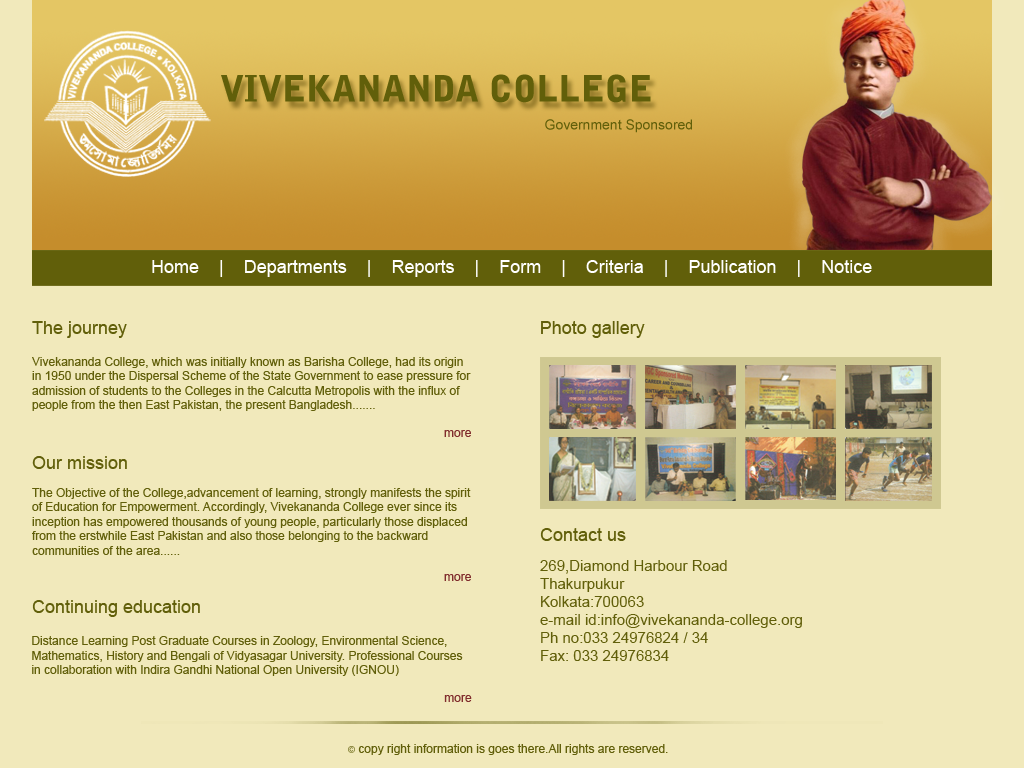
<style>
.page{position:relative;width:1024px;height:768px;background:#f1e9bb}
.page>*{position:absolute;margin:0}
.t1{font:36px "BellGothicStd-Black";color:#615f0a}
.t2{font:14px "ArialMT";color:#615f0a}
.t3{font:18px "ArialMT";color:#ffffff}
.t4{font:18px "ArialMT";color:#615f0a}
.t5{font:12px "ArialMT";color:#615f0a}
.t6{font:12px "ArialMT";color:#802c2c}
.t7{font:15px "ArialMT";color:#615f0a}
</style>
<div class="page">
<p class="t1" style="left:221px;top:74px;width:430px;height:29px">VIVEKANANDA COLLEGE</p>
<p class="t2" style="left:545px;top:119px;width:147px;height:14px">Government Sponsored</p>
<p class="t3" style="left:152px;top:260px;width:720px;height:17px">Home    |    Departments    |    Reports    |    Form    |    Criteria    |    Publication    |    Notice</p>
<p class="t4" style="left:32px;top:321px;width:95px;height:17px">The journey</p>
<p class="t4" style="left:541px;top:321px;width:104px;height:17px">Photo gallery</p>
<p class="t5" style="left:32px;top:357px;width:439px;height:54px">Vivekananda College, which was initially known as Barisha College, had its origin<br>in 1950 under the Dispersal Scheme of the State Government to ease pressure for<br>admission of students to the Colleges in the Calcutta Metropolis with the influx of <br>people from the then East Pakistan, the present Bangladesh.......</p>
<p class="t6" style="left:444px;top:430px;width:27px;height:7px">more</p>
<p class="t4" style="left:32px;top:456px;width:95px;height:13px">Our mission</p>
<p class="t5" style="left:32px;top:488px;width:439px;height:67px">The Objective of the College,advancement of learning, strongly manifests the spirit<br>of Education for Empowerment. Accordingly, Vivekananda College ever since its <br>inception has empowered thousands of young people, particularly those displaced<br>from the erstwhile East Pakistan and also those belonging to the backward <br>communities of the area......</p>
<p class="t4" style="left:540px;top:528px;width:86px;height:13px">Contact us</p>
<p class="t7" style="left:540px;top:560px;width:262px;height:101px">269,Diamond Harbour Road<br>Thakurpukur<br>Kolkata:700063<br>e-mail id:info@vivekananda-college.org<br>Ph no:033 24976824 / 34<br>Fax: 033 24976834</p>
<p class="t6" style="left:444px;top:574px;width:27px;height:7px">more</p>
<p class="t4" style="left:32px;top:600px;width:168px;height:17px">Continuing education</p>
<p class="t5" style="left:32px;top:636px;width:431px;height:40px">Distance Learning Post Graduate Courses in Zoology, Environmental Science, <br>Mathematics, History and Bengali of Vidyasagar University. Professional Courses <br>in collaboration with Indira Gandhi National Open University (IGNOU)</p>
<p class="t6" style="left:444px;top:695px;width:28px;height:7px">more</p>
<p class="t5" style="left:358px;top:744px;width:310px;height:11px">copy right information is goes there.All rights are reserved.</p>
</div>
